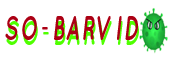
<style>
.page{position:relative;width:170px;height:66px;background:#ffffff}
.page>*{position:absolute;margin:0}
.t1{font:34.2px "Quicksand-BoldItalic";letter-spacing:0.1em;color:#ab0014;scale:0.63 1}
.t2{font:34.2px "Quicksand-BoldItalic";letter-spacing:0.1em;color:#4fff00;scale:0.63 1}
</style>
<div class="page">
<p class="t1" style="left:5px;top:16px;width:133px;height:24px">SO-BARVID</p>
<p class="t2" style="left:6px;top:21px;width:133px;height:24px">SO-BARVID</p>
</div>
